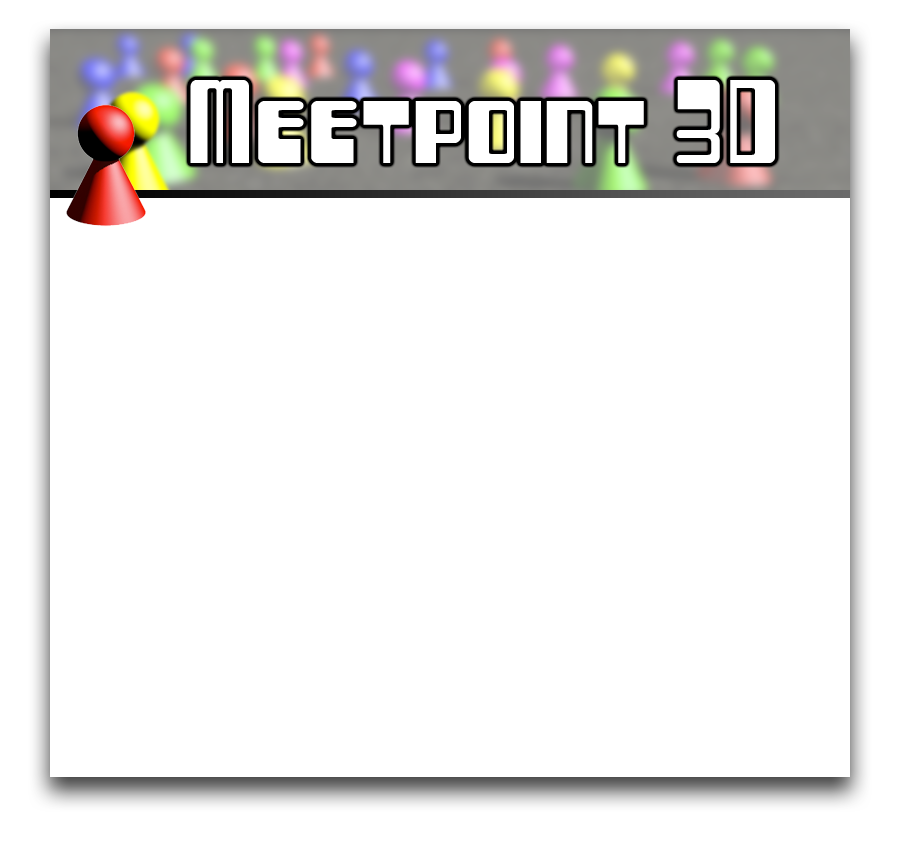
<style>
.page{position:relative;width:900px;height:845px;background:#ffffff}
.page>*{position:absolute;margin:0}
.t1{font:113.4px "256Bytes";color:#ffffff}
</style>
<div class="page">
<p class="t1" style="left:190px;top:80px;width:585px;height:83px">Meetpoint 3D</p>
</div>
